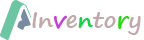
<style>
.page{position:relative;width:144px;height:40px;background:#ffffff}
.page>*{position:absolute;margin:0}
.t1{font:23px "SegoePrint-Bold";color:#c0a9a9}
.t2{font:23px "SegoePrint-Bold";color:#c53fd5}
.t3{font:23px "SegoePrint-Bold";color:#13d149}
.t4{font:23px "SegoePrint-Bold";color:#29d612}
</style>
<div class="page">
<p class="t1" style="left:32px;top:12px;width:109px;height:23px">In<span class="t2">v</span>e<span class="t3">n</span>to<span class="t4">r</span>y</p>
</div>
